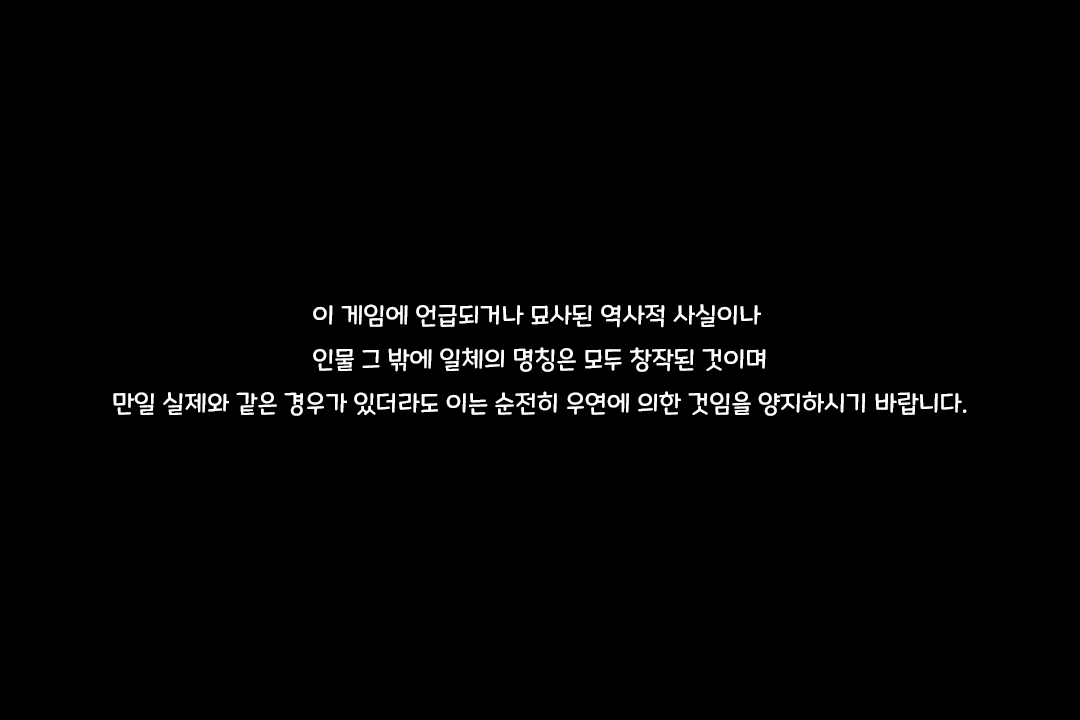
<style>
.page{position:relative;width:1080px;height:720px;background:#000000}
.page>*{position:absolute;margin:0}
.t1{font:25px "MaplestoryLight";color:#fefefe}
</style>
<div class="page">
<p class="t1" style="left:113px;top:304px;width:854px;height:112px;text-align:center">이 게임에 언급되거나 묘사된 역사적 사실이나 <br>인물 그 밖에 일체의 명칭은 모두 창작된 것이며<br>만일 실제와 같은 경우가 있더라도 이는 순전히 우연에 의한 것임을 양지하시기 바랍니다.</p>
</div>
